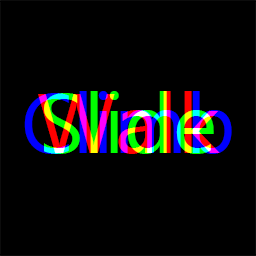
<style>
.page{position:relative;width:256px;height:256px;background:#000000}
.page>*{position:absolute;margin:0}
.t1{font:83.5px "Gadugi"}
</style>
<div class="page">
<p class="t1" style="left:24px;top:91px;width:208px;height:63px">Climb</p>
<p class="t1" style="left:38px;top:91px;width:182px;height:63px">Walk</p>
<p class="t1" style="left:44px;top:91px;width:170px;height:63px">Slide</p>
</div>
